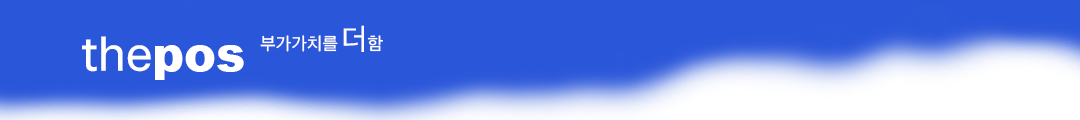
<style>
.page{position:relative;width:1080px;height:120px;background:#2a56d9}
.page>*{position:absolute;margin:0}
.t1{font:18px "TossProductSansTTF-Medium";color:#ffffff}
.t2{font:30px "TossProductSansTTF-Medium";color:#ffffff}
.t3{font:48px "TossProductSansTTF-Medium";color:#ffffff}
.t4{font:48px "Arial-Black";color:#ffffff}
</style>
<div class="page">
<p class="t1" style="left:260px;top:25px;width:123px;height:27px">부가가치를 <span class="t2">더</span>함</p>
<p class="t3" style="left:82px;top:36px;width:162px;height:44px">the<span class="t4">pos</span></p>
</div>
